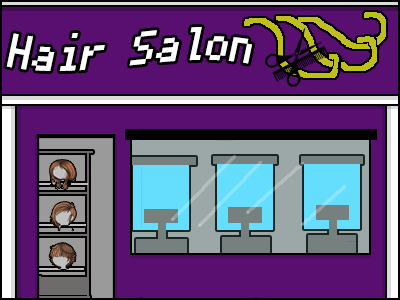
<style>
.page{position:relative;width:400px;height:300px;background:#590f70}
.page>*{position:absolute;margin:0}
.t1{font:48px "PixelMplus10-Regular";color:#ffffff}
</style>
<div class="page">
<p class="t1" style="left:6px;top:27px;width:246px;height:44px;rotate:12deg">Hair Salon</p>
</div>
